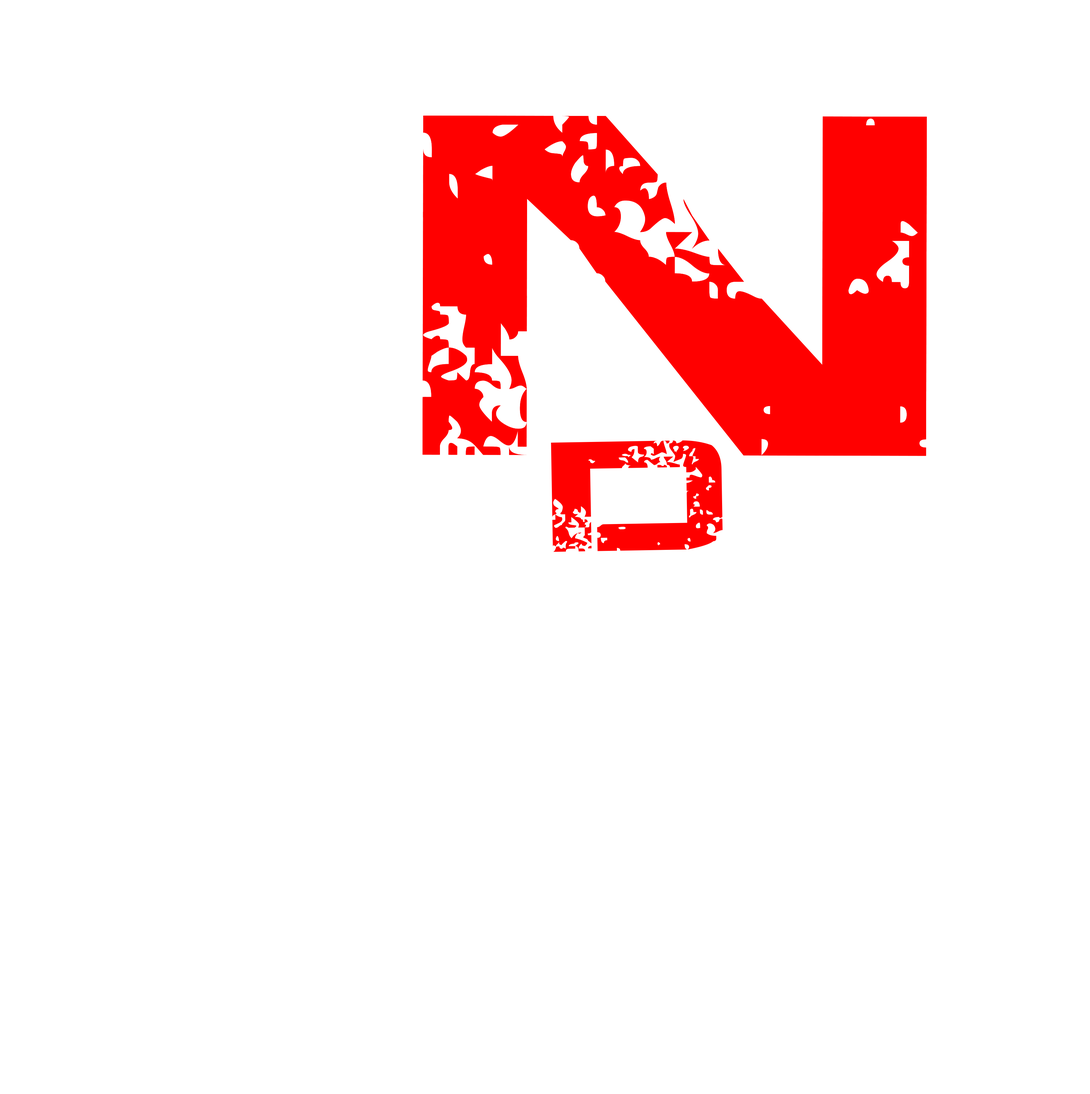
<style>
.page{position:relative;width:1090px;height:1094px;background:#ffffff}
.page>*{position:absolute;margin:0}
.t1{font:485.1px "JacintoSans";color:#ff0000;scale:1.05 1}
.t2{font:313.7px "JacintoSans";color:#ff0000;scale:1.21 1}
</style>
<div class="page">
<p class="t1" style="left:423px;top:116px;width:504px;height:340px">N</p>
<p class="t1" style="left:423px;top:116px;width:504px;height:340px">N</p>
<p class="t2" style="left:551px;top:440px;width:172px;height:112px">d</p>
</div>
